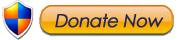
<style>
.page{position:relative;width:180px;height:40px;background:#ffffff}
.page>*{position:absolute;margin:0}
.t1{font:18px "CenturyGothic";letter-spacing:-0.05em;color:#1f275f;font-weight:bold;font-style:italic}
</style>
<div class="page">
<p class="t1" style="left:55px;top:13px;width:109px;height:15px">Donate Now</p>
</div>
